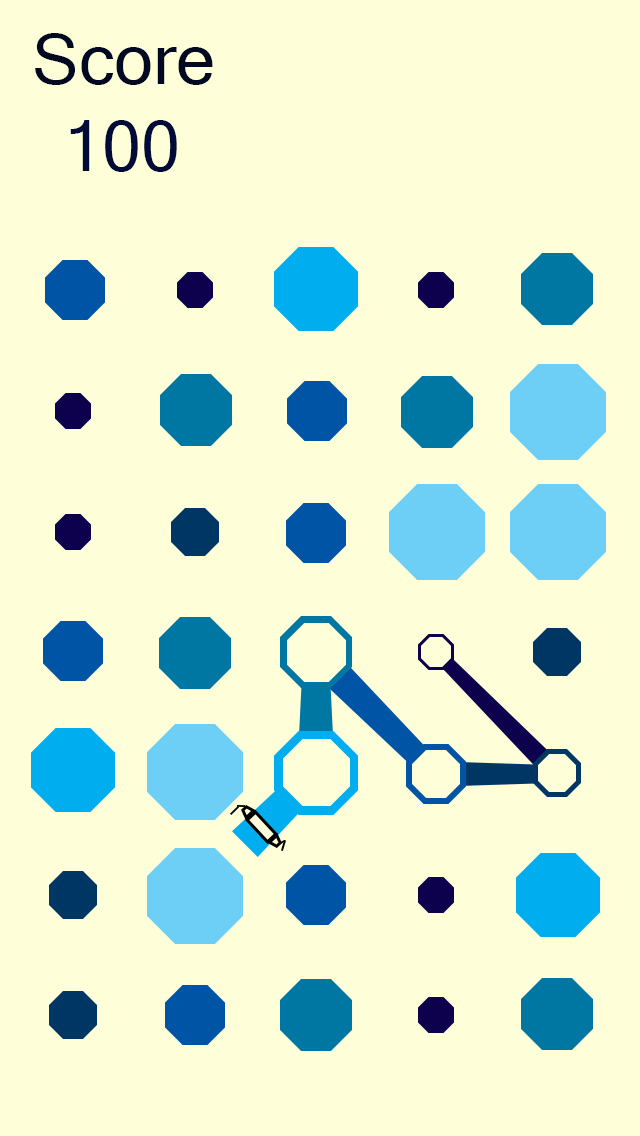
<style>
.page{position:relative;width:640px;height:1136px;background:#fefed9}
.page>*{position:absolute;margin:0}
.t1{font:70px "MicrosoftSansSerif";color:#000822}
.t2{font:70px "MicrosoftSansSerif";color:#000c37}
</style>
<div class="page">
<p class="t1" style="left:35px;top:33px;width:178px;height:52px">Score</p>
<p class="t2" style="left:70px;top:120px;width:107px;height:52px">100</p>
</div>
